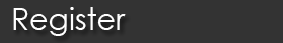
<style>
.page{position:relative;width:283px;height:43px;background:#333333}
.page>*{position:absolute;margin:0}
.t1{font:30px "CenturyGothic";color:#ffffff}
</style>
<div class="page">
<p class="t1" style="left:13px;top:7px;width:113px;height:29px">Register</p>
</div>
